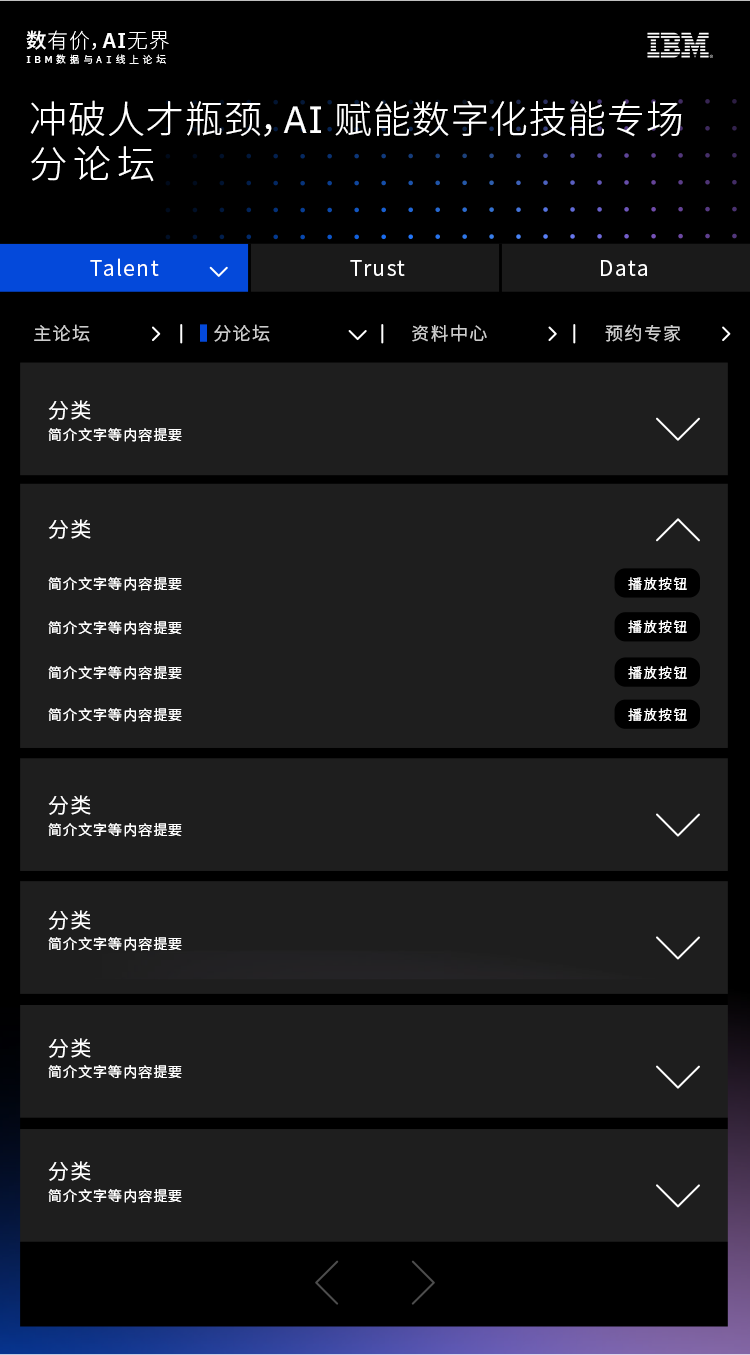
<style>
.page{position:relative;width:750px;height:1355px;background:#1e1e1e}
.page>*{position:absolute;margin:0}
.t1{font:20.7px "NotoSansCJKsc-Thin";letter-spacing:0.05em;color:#ffffff}
.t2{font:20.7px "NotoSansCJKsc-Medium";letter-spacing:0.05em;color:#ffffff}
.t3{font:20.7px "NotoSansCJKsc-Light";letter-spacing:0.05em;color:#ffffff}
.t4{font:20.7px "IBMPlexSans-SemiBold";letter-spacing:0.05em;color:#ffffff}
.t5{font:9.8px "NotoSansCJKsc-Light";letter-spacing:0.37em;color:#ffffff}
.t6{font:9.8px "IBMPlexSans-Medium";letter-spacing:0.37em;color:#ffffff}
.t7{font:9.8px "IBMPlexMono-Light";letter-spacing:0.37em;color:#ffffff}
.t8{font:38px "NotoSansCJKsc-Light";letter-spacing:0.025em;color:#ffffff}
.t9{font:38px "IBMPlexSans";letter-spacing:0.025em;color:#ffffff}
.t10{font:38px "NotoSansCJKsc-Light";letter-spacing:0.15em;color:#ffffff}
.t11{font:21px "NotoSansCJKsc-DemiLight";letter-spacing:0.075em;color:#ffffff}
.t12{font:18px "NotoSansCJKsc-DemiLight";letter-spacing:0.075em;color:#cccccc}
.t13{font:14px "NotoSansCJKsc-DemiLight";letter-spacing:0.075em;color:#ffffff}
</style>
<div class="page">
<p class="t1" style="left:26px;top:30px;width:143px;height:20px"><span class="t2">数</span>有价<span class="t3">，</span><span class="t4">AI</span>无界</p>
<p class="t5" style="left:26px;top:54px;width:140px;height:10px"><span class="t6">IBM</span>数据与<span class="t7">AI</span>线上论坛</p>
<p class="t8" style="left:30px;top:100px;width:652px;height:37px">冲破人才瓶颈，<span class="t9">AI </span>赋能数字化技能专场</p>
<p class="t10" style="left:31px;top:146px;width:123px;height:36px">分论坛</p>
<p class="t11" style="left:90px;top:258px;width:69px;height:18px">Talent</p>
<p class="t11" style="left:350px;top:260px;width:55px;height:16px">Trust</p>
<p class="t11" style="left:601px;top:260px;width:46px;height:16px">Data</p>
<p class="t12" style="left:34px;top:324px;width:56px;height:18px">主论坛</p>
<p class="t12" style="left:214px;top:324px;width:56px;height:18px">分论坛</p>
<p class="t12" style="left:412px;top:324px;width:75px;height:18px">资料中心</p>
<p class="t12" style="left:605px;top:324px;width:76px;height:18px">预约专家</p>
<p class="t11" style="left:48px;top:400px;width:43px;height:20px">分类</p>
<p class="t13" style="left:48px;top:428px;width:134px;height:14px">简介文字等内容提要</p>
<p class="t11" style="left:48px;top:519px;width:43px;height:20px">分类</p>
<p class="t13" style="left:48px;top:577px;width:134px;height:14px">简介文字等内容提要</p>
<p class="t13" style="left:628px;top:577px;width:59px;height:13px">播放按钮</p>
<p class="t13" style="left:48px;top:621px;width:134px;height:14px">简介文字等内容提要</p>
<p class="t13" style="left:628px;top:620px;width:59px;height:13px">播放按钮</p>
<p class="t13" style="left:48px;top:666px;width:134px;height:14px">简介文字等内容提要</p>
<p class="t13" style="left:628px;top:666px;width:59px;height:13px">播放按钮</p>
<p class="t13" style="left:48px;top:708px;width:134px;height:14px">简介文字等内容提要</p>
<p class="t13" style="left:628px;top:708px;width:59px;height:13px">播放按钮</p>
<p class="t11" style="left:48px;top:795px;width:43px;height:20px">分类</p>
<p class="t13" style="left:48px;top:823px;width:134px;height:14px">简介文字等内容提要</p>
<p class="t11" style="left:48px;top:910px;width:43px;height:20px">分类</p>
<p class="t13" style="left:48px;top:937px;width:134px;height:14px">简介文字等内容提要</p>
<p class="t11" style="left:48px;top:1038px;width:43px;height:20px">分类</p>
<p class="t13" style="left:48px;top:1065px;width:134px;height:14px">简介文字等内容提要</p>
<p class="t11" style="left:48px;top:1161px;width:43px;height:20px">分类</p>
<p class="t13" style="left:48px;top:1189px;width:134px;height:14px">简介文字等内容提要</p>
</div>
